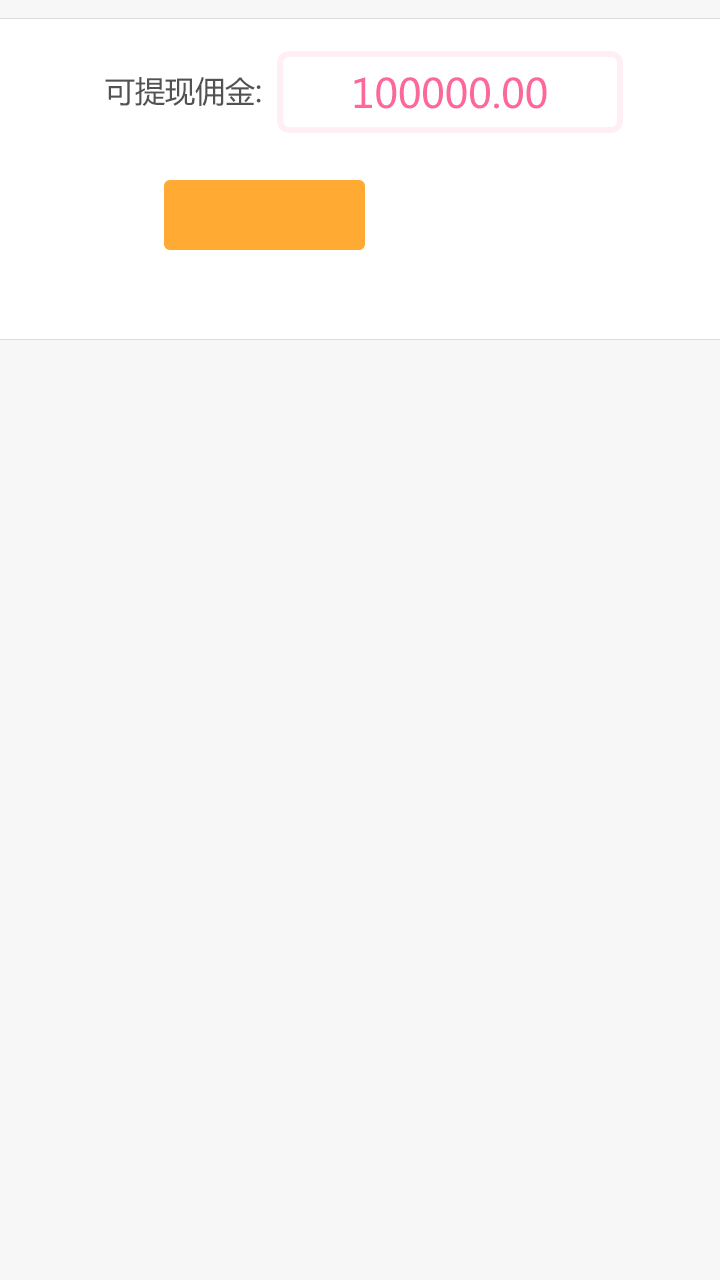
<style>
.page{position:relative;width:720px;height:1280px;background:#f7f7f7}
.page>*{position:absolute;margin:0}
.t1{font:30px "MicrosoftYaHei";color:#525252}
.t2{font:40px "MicrosoftYaHei";color:#fd679a}
</style>
<div class="page">
<p class="t1" style="left:105px;top:77px;width:156px;height:29px">可提现佣金:</p>
<p class="t2" style="left:354px;top:77px;width:193px;height:32px">100000.00</p>
</div>
